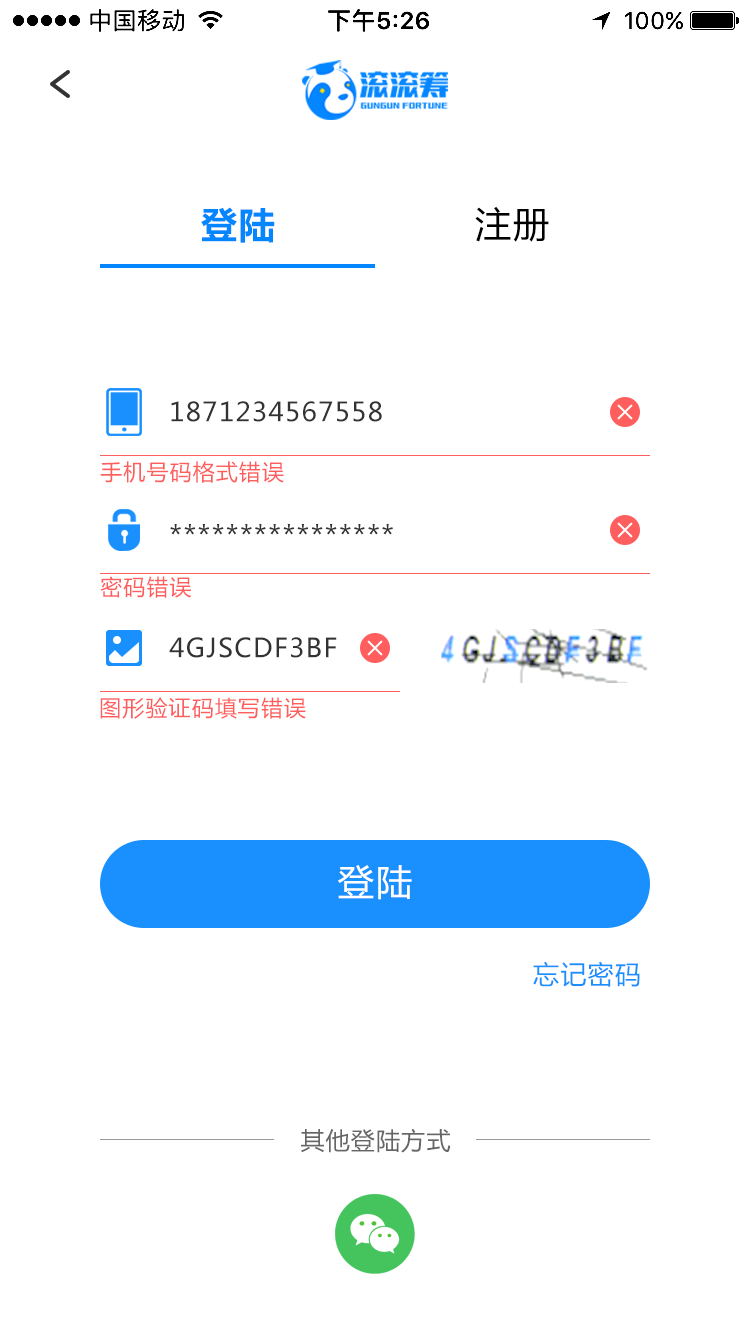
<style>
.page{position:relative;width:750px;height:1334px;background:#ffffff}
.page>*{position:absolute;margin:0}
.t1{font:36px "MicrosoftYaHei-Bold";letter-spacing:0.05em;color:#0386ff}
.t2{font:36px "MicrosoftYaHei";letter-spacing:0.05em;color:#000000}
.t3{font:26px "MicrosoftYaHei";letter-spacing:0.05em;color:#333333}
.t4{font:22px "MicrosoftYaHei";letter-spacing:0.05em;color:#ff5e5e}
.t5{font:28px "MicrosoftYaHei";letter-spacing:0.05em;color:#333333}
.t6{font:36px "MicrosoftYaHei";letter-spacing:0.05em;color:#ffffff}
.t7{font:26px "MicrosoftYaHei";letter-spacing:0.05em;color:#1990fe}
.t8{font:24px "MicrosoftYaHei";letter-spacing:0.05em;color:#666666}
</style>
<div class="page">
<p class="t1" style="left:201px;top:207px;width:74px;height:36px">登陆</p>
<p class="t2" style="left:475px;top:206px;width:74px;height:36px">注册</p>
<p class="t3" style="left:171px;top:401px;width:211px;height:21px">1871234567558</p>
<p class="t4" style="left:100px;top:461px;width:184px;height:22px">手机号码格式错误</p>
<p class="t5" style="left:170px;top:524px;width:223px;height:11px">****************</p>
<p class="t4" style="left:100px;top:576px;width:92px;height:22px">密码错误</p>
<p class="t3" style="left:169px;top:637px;width:168px;height:21px">4GJSCDF3BF</p>
<p class="t4" style="left:100px;top:697px;width:206px;height:22px">图形验证码填写错误</p>
<p class="t6" style="left:338px;top:865px;width:74px;height:35px">登陆</p>
<p class="t7" style="left:533px;top:961px;width:107px;height:26px">忘记密码</p>
<p class="t8" style="left:301px;top:1128px;width:150px;height:25px">其他登陆方式</p>
</div>
